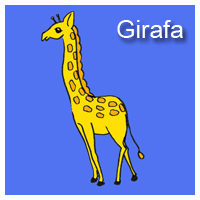
<style>
.page{position:relative;width:200px;height:200px;background:#5173f1}
.page>*{position:absolute;margin:0}
.t1{font:25px "ArialMT";color:#ffffff}
</style>
<div class="page">
<p class="t1" style="left:117px;top:20px;width:66px;height:18px">Girafa</p>
</div>
